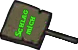
<style>
.page{position:relative;width:78px;height:50px;background:#ffffff}
.page>*{position:absolute;margin:0}
.t1{font:9.9px/8.7px "dwrvntod";color:#56ec33}
</style>
<div class="page">
<p class="t1" style="left:15px;top:9px;width:21px;height:28px;text-align:center;rotate:-73deg">Schlag<br>mich</p>
</div>
